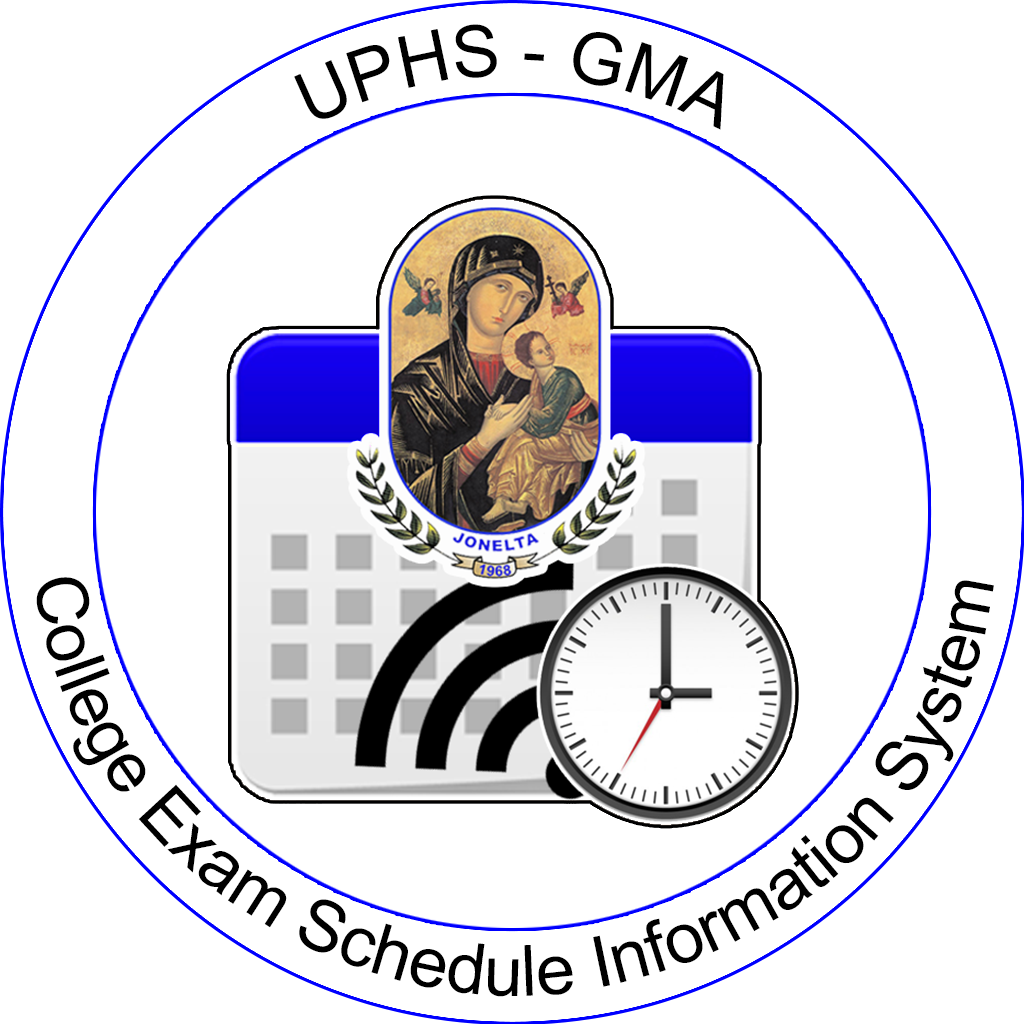
<style>
.page{position:relative;width:1024px;height:1024px;background:#ffffff}
.page>*{position:absolute;margin:0}
.t1{font:72px "ArialMT";color:#000000}
.t2{font:70.8px "ArialMT";color:#000000}
</style>
<div class="page">
<p class="t1" style="left:294px;top:24px;width:430px;height:106px">UPHS - GMA</p>
<p class="t2" style="left:36px;top:577px;width:958px;height:420px;text-align:center">College Exam Schedule Information System</p>
</div>
